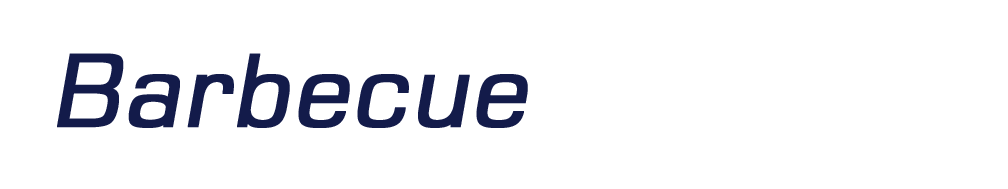
<style>
.page{position:relative;width:1008px;height:189px;background:#ffffff}
.page>*{position:absolute;margin:0}
.t1{font:99.6px "Square721BT-Roman";color:#131b4a;font-weight:bold;font-style:italic}
</style>
<div class="page">
<p class="t1" style="left:57px;top:53px;width:471px;height:75px">Barbecue</p>
</div>
